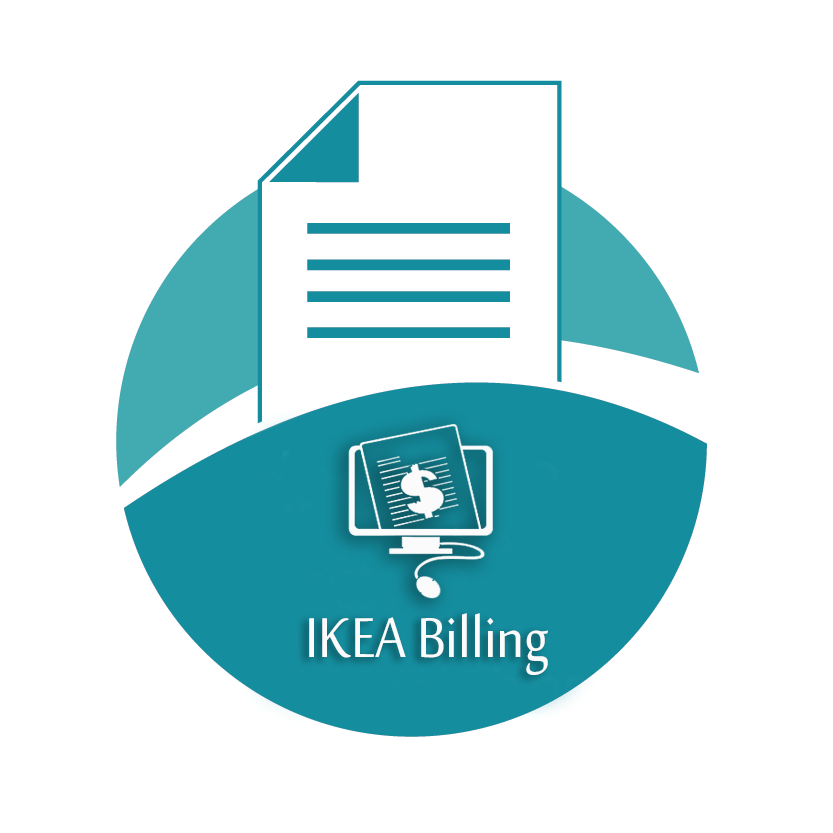
<style>
.page{position:relative;width:833px;height:833px;background:#ffffff}
.page>*{position:absolute;margin:0}
.t1{font:77.6px "SakkalMajalla";color:#fbfbfb;scale:0.88 1}
</style>
<div class="page">
<p class="t1" style="left:309px;top:613px;width:239px;height:62px">IKEA Billing</p>
</div>
